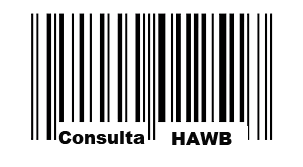
<style>
.page{position:relative;width:303px;height:167px;background:#ffffff}
.page>*{position:absolute;margin:0}
.t1{font:18px "Arial-Black";color:#070707}
</style>
<div class="page">
<p class="t1" style="left:58px;top:131px;width:87px;height:13px">Consulta</p>
<p class="t1" style="left:172px;top:132px;width:60px;height:13px">HAWB</p>
</div>
